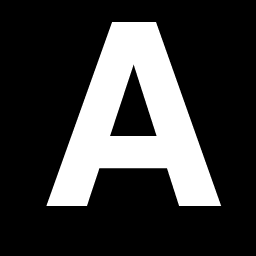
<style>
.page{position:relative;width:256px;height:256px;background:#000000}
.page>*{position:absolute;margin:0}
.t1{font:256px "Helvetica-Bold";color:#ffffff}
</style>
<div class="page">
<p class="t1" style="left:46px;top:22px;width:176px;height:184px">A</p>
</div>
